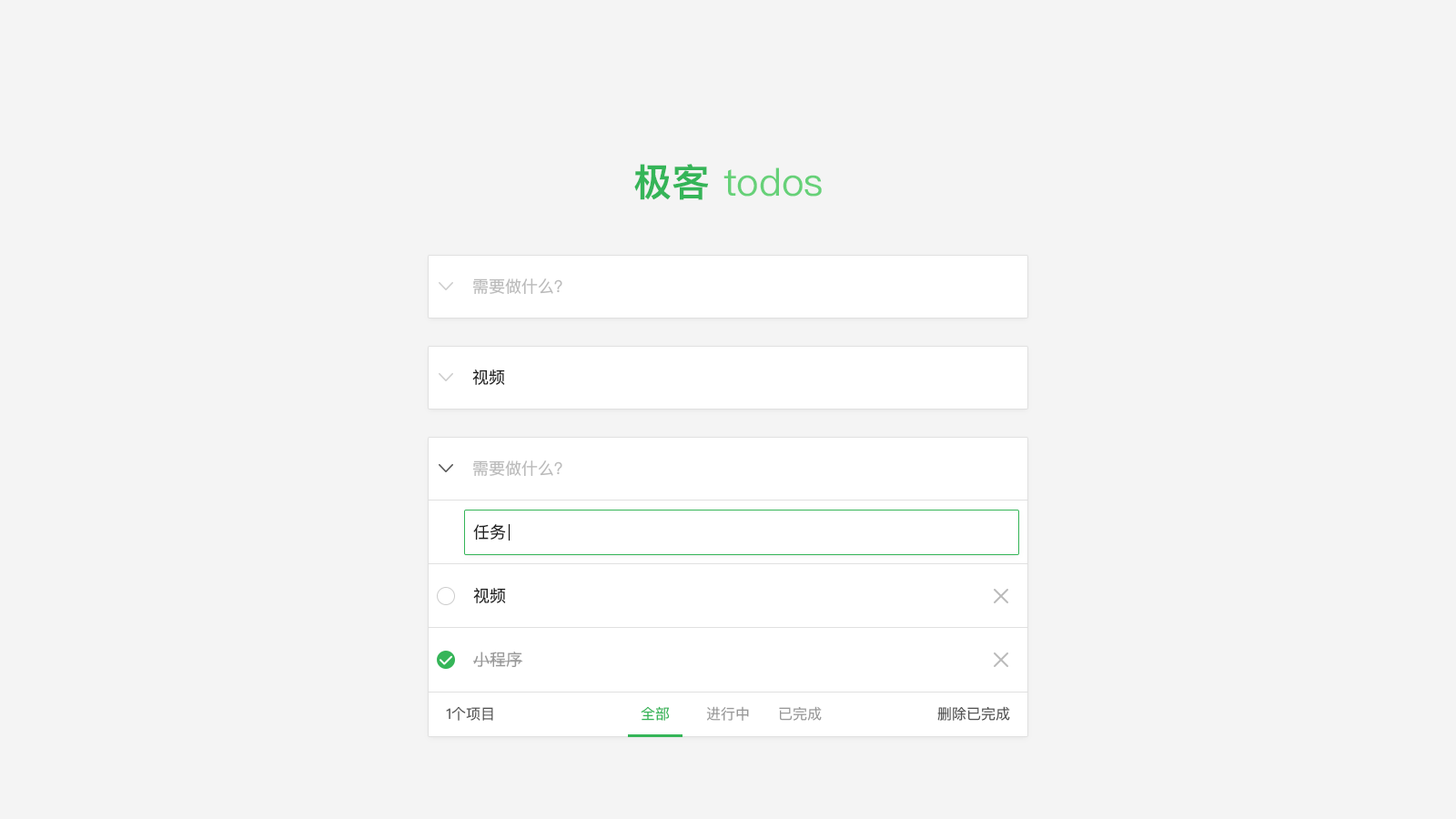
<style>
.page{position:relative;width:1456px;height:819px;background:#f4f4f4}
.page>*{position:absolute;margin:0}
.t1{font:38.2px "PingFangSC-Regular";color:#66d178}
.t2{font:38.2px "PingFangSC-Semibold";color:#35b558}
.t3{font:16.4px "PingFangSC-Regular";color:#bbbbbb}
.t4{font:16.4px "PingFangSC-Regular";color:#222222}
.t5{font:16.4px "PingFangSC-Regular";color:#999999}
.t6{font:14.6px "PingFangSC-Regular";color:#535353}
.t7{font:14.6px "PingFangSC-Regular";color:#35b558}
.t8{font:14.6px "PingFangSC-Regular";color:#999999}
</style>
<div class="page">
<p class="t1" style="left:634px;top:164px;width:188px;height:36px"><span class="t2">极客 </span>todos</p>
<p class="t3" style="left:472px;top:278px;width:90px;height:16px">需要做什么？</p>
<p class="t4" style="left:472px;top:369px;width:33px;height:16px">视频</p>
<p class="t3" style="left:472px;top:460px;width:90px;height:16px">需要做什么？</p>
<p class="t4" style="left:473px;top:524px;width:33px;height:16px">任务</p>
<p class="t4" style="left:473px;top:588px;width:33px;height:15px">视频</p>
<p class="t5" style="left:473px;top:652px;width:50px;height:15px">小程序</p>
<p class="t6" style="left:446px;top:706px;width:47px;height:15px">1个项目</p>
<p class="t7" style="left:641px;top:706px;width:29px;height:15px">全部</p>
<p class="t8" style="left:706px;top:706px;width:43px;height:15px">进行中</p>
<p class="t8" style="left:779px;top:706px;width:43px;height:15px">已完成</p>
<p class="t6" style="left:937px;top:706px;width:73px;height:15px">删除已完成</p>
</div>
